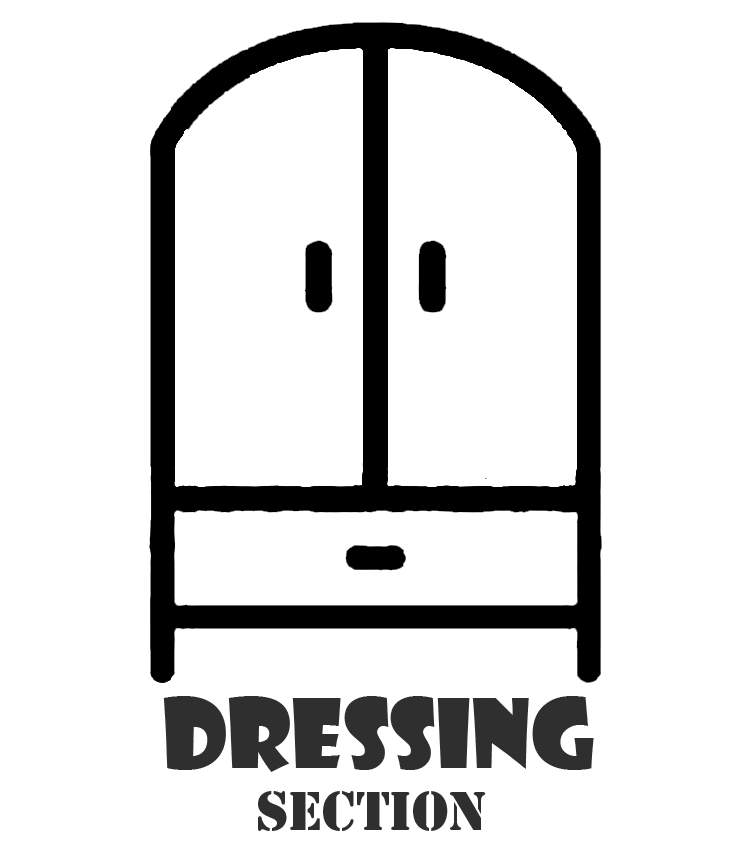
<style>
.page{position:relative;width:750px;height:852px;background:#ffffff}
.page>*{position:absolute;margin:0}
.t1{font:92.8px "ShowcardGothic-Reg";color:#2f2f2f}
.t2{font:51.3px "StencilStd";color:#2f2f2f}
</style>
<div class="page">
<p class="t1" style="left:163px;top:696px;width:431px;height:135px">Dressing<br>       <span class="t2">Section</span></p>
</div>
